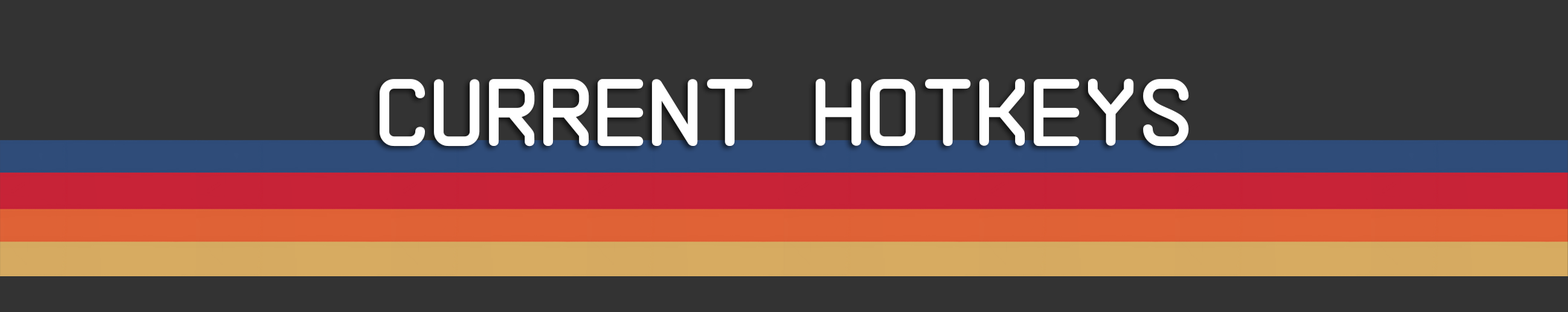
<style>
.page{position:relative;width:1568px;height:312px;background:#333333}
.page>*{position:absolute;margin:0}
.t1{font:95.3px "NB-Architekt";color:#ffffff}
</style>
<div class="page">
<p class="t1" style="left:380px;top:78px;width:809px;height:69px">Current Hotkeys</p>
</div>
